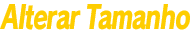
<style>
.page{position:relative;width:190px;height:34px;background:#ffffff}
.page>*{position:absolute;margin:0}
.t1{font:32px "RodinPro-EB";letter-spacing:-0.054em;color:#fecd00;font-style:italic;scale:0.74 1}
</style>
<div class="page">
<p class="t1" style="left:0px;top:4px;width:190px;height:26px">Alterar Tamanho</p>
</div>
